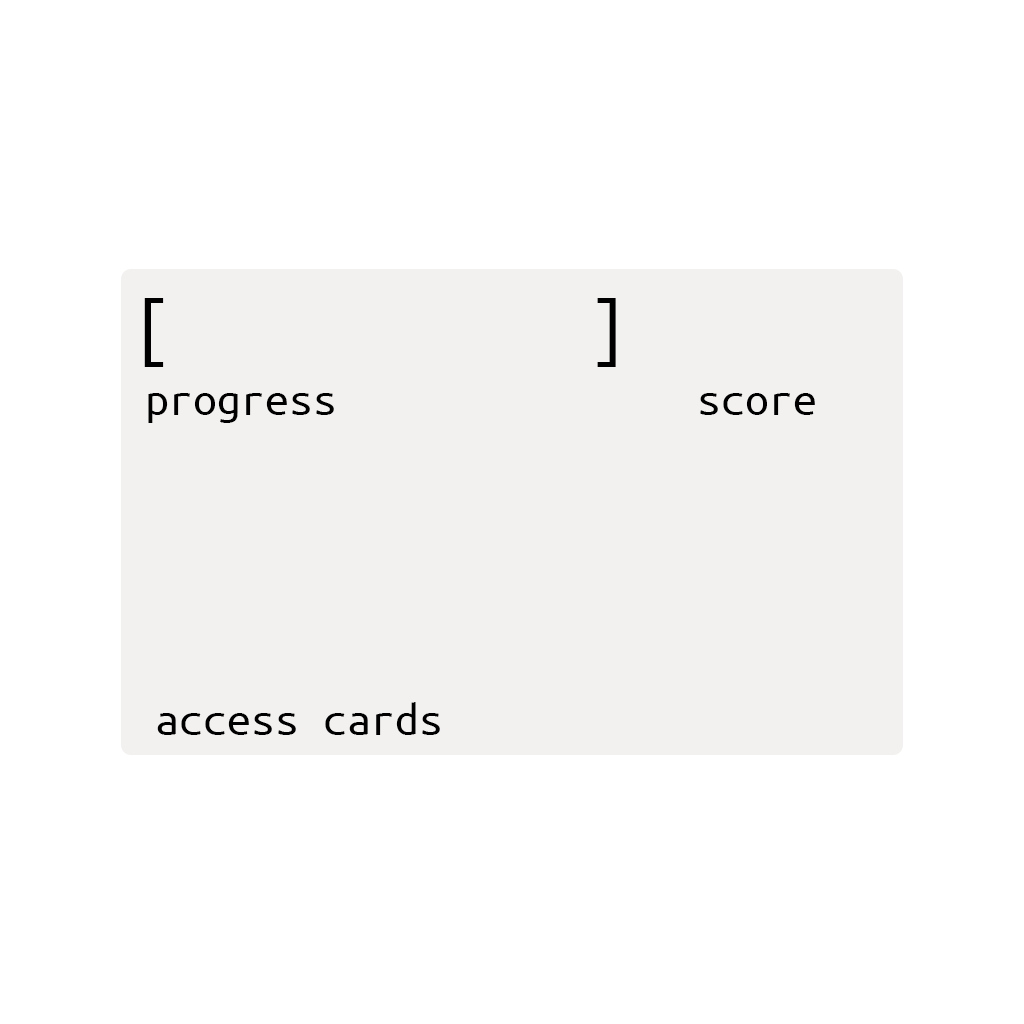
<style>
.page{position:relative;width:1024px;height:1024px;background:#ffffff}
.page>*{position:absolute;margin:0}
.t1{font:72px "Tahoma";color:#000000}
.t2{font:48px "UbuntuMono-Regular";color:#000000}
</style>
<div class="page">
<p class="t1" style="left:144px;top:298px;width:472px;height:69px">[                   ]</p>
<p class="t2" style="left:148px;top:393px;width:186px;height:30px">progress</p>
<p class="t2" style="left:700px;top:393px;width:115px;height:22px">score</p>
<p class="t2" style="left:157px;top:702px;width:283px;height:33px">access cards</p>
</div>
